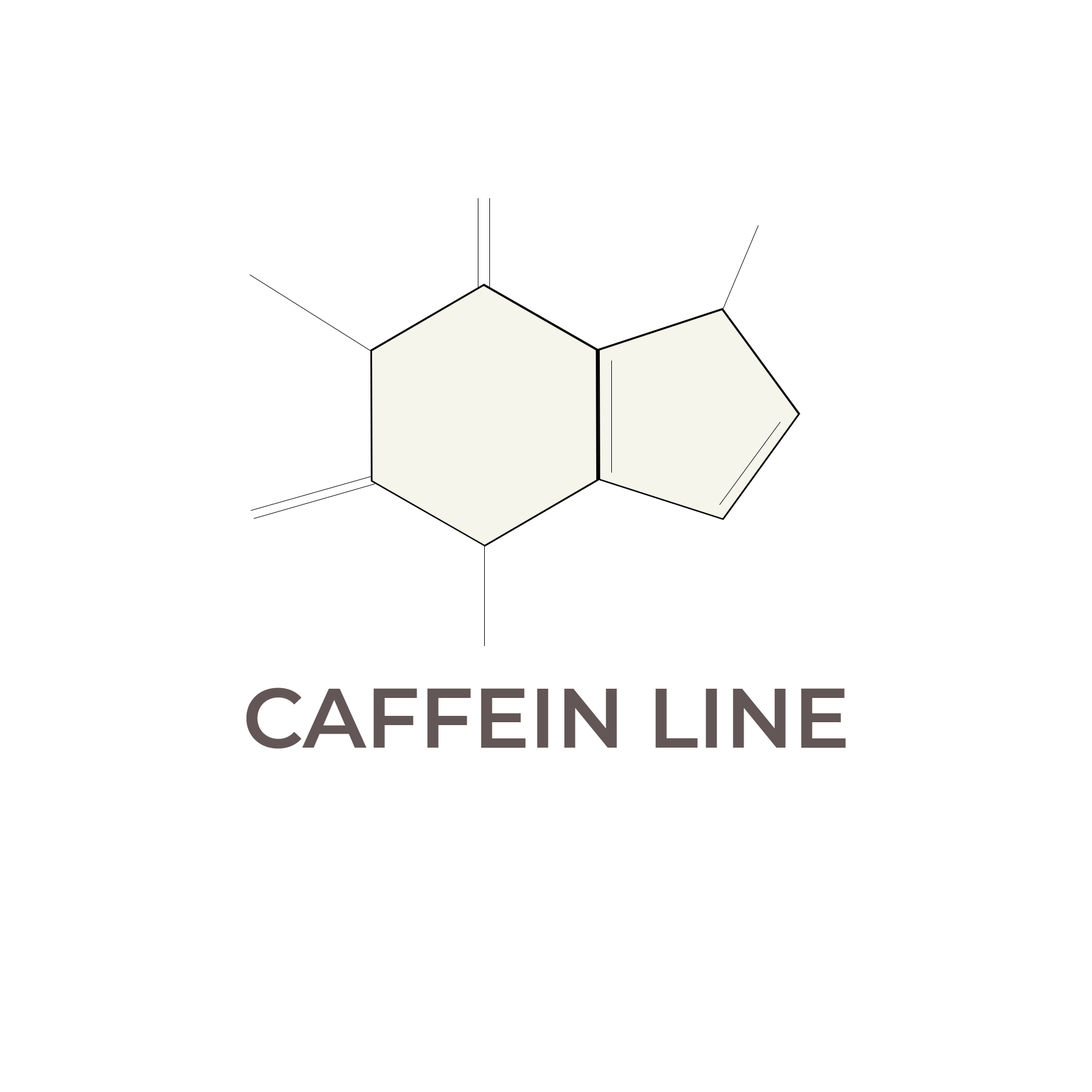
<style>
.page{position:relative;width:1092px;height:1092px;background:#ffffff}
.page>*{position:absolute;margin:0}
.t1{font:84.3px "Montserrat-SemiBold";color:#635656}
</style>
<div class="page">
<p class="t1" style="left:246px;top:688px;width:600px;height:61px">CAFFEIN LINE</p>
</div>
